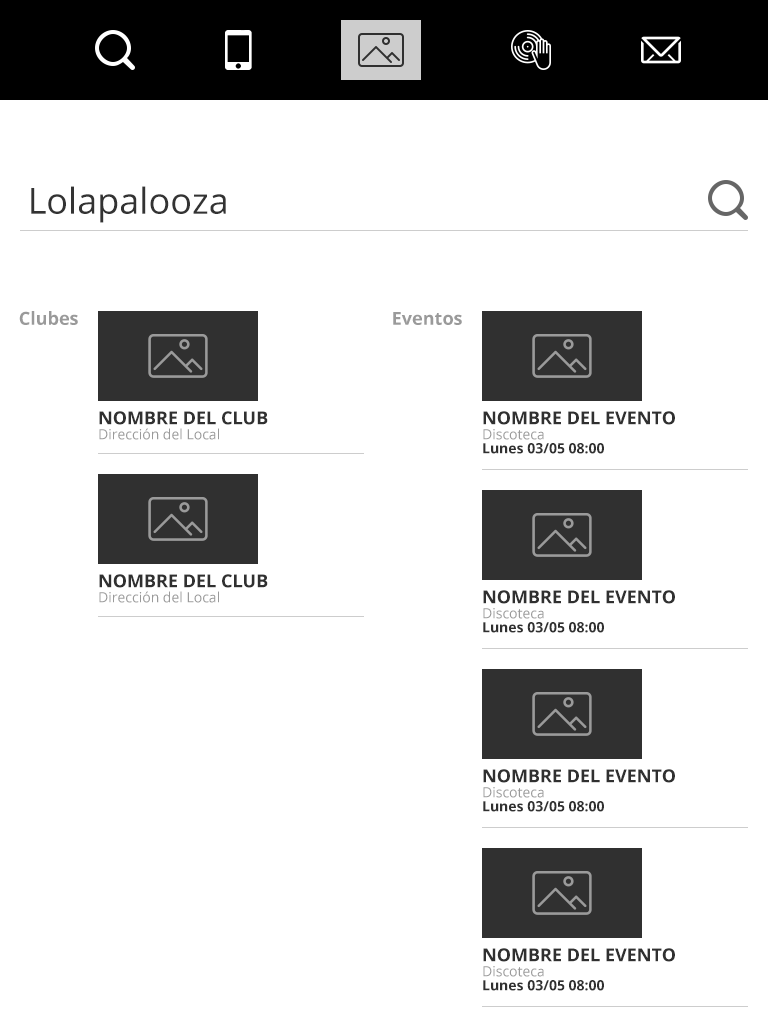
<style>
.page{position:relative;width:768px;height:1024px;background:#ffffff}
.page>*{position:absolute;margin:0}
.t1{font:36px "OpenSans";color:#333333}
.t2{font:18px "OpenSans-Bold";color:#9a9a9a}
.t3{font:18px "OpenSans-Bold";color:#303030;text-transform:uppercase}
.t4{font:14px "OpenSans";color:#9a9a9a}
.t5{font:14px "OpenSans-Bold";color:#303030}
</style>
<div class="page">
<p class="t1" style="left:31px;top:186px;width:195px;height:37px">Lolapalooza</p>
<p class="t2" style="left:19px;top:311px;width:59px;height:14px">Clubes</p>
<p class="t2" style="left:393px;top:312px;width:69px;height:13px">Eventos</p>
<p class="t3" style="left:99px;top:411px;width:169px;height:14px">Nombre del club</p>
<p class="t3" style="left:483px;top:411px;width:192px;height:14px">Nombre del evento</p>
<p class="t4" style="left:99px;top:428px;width:120px;height:12px">Dirección del Local</p>
<p class="t4" style="left:483px;top:429px;width:61px;height:11px">Discoteca</p>
<p class="t5" style="left:483px;top:443px;width:121px;height:11px">Lunes 03/05 08:00</p>
<p class="t3" style="left:99px;top:574px;width:169px;height:14px">Nombre del club</p>
<p class="t4" style="left:99px;top:591px;width:120px;height:12px">Dirección del Local</p>
<p class="t3" style="left:483px;top:590px;width:192px;height:14px">Nombre del evento</p>
<p class="t4" style="left:483px;top:608px;width:61px;height:11px">Discoteca</p>
<p class="t5" style="left:483px;top:622px;width:121px;height:11px">Lunes 03/05 08:00</p>
<p class="t3" style="left:483px;top:769px;width:192px;height:14px">Nombre del evento</p>
<p class="t4" style="left:483px;top:787px;width:61px;height:11px">Discoteca</p>
<p class="t5" style="left:483px;top:801px;width:121px;height:11px">Lunes 03/05 08:00</p>
<p class="t3" style="left:483px;top:948px;width:192px;height:14px">Nombre del evento</p>
<p class="t4" style="left:483px;top:966px;width:61px;height:11px">Discoteca</p>
<p class="t5" style="left:483px;top:980px;width:121px;height:11px">Lunes 03/05 08:00</p>
</div>
